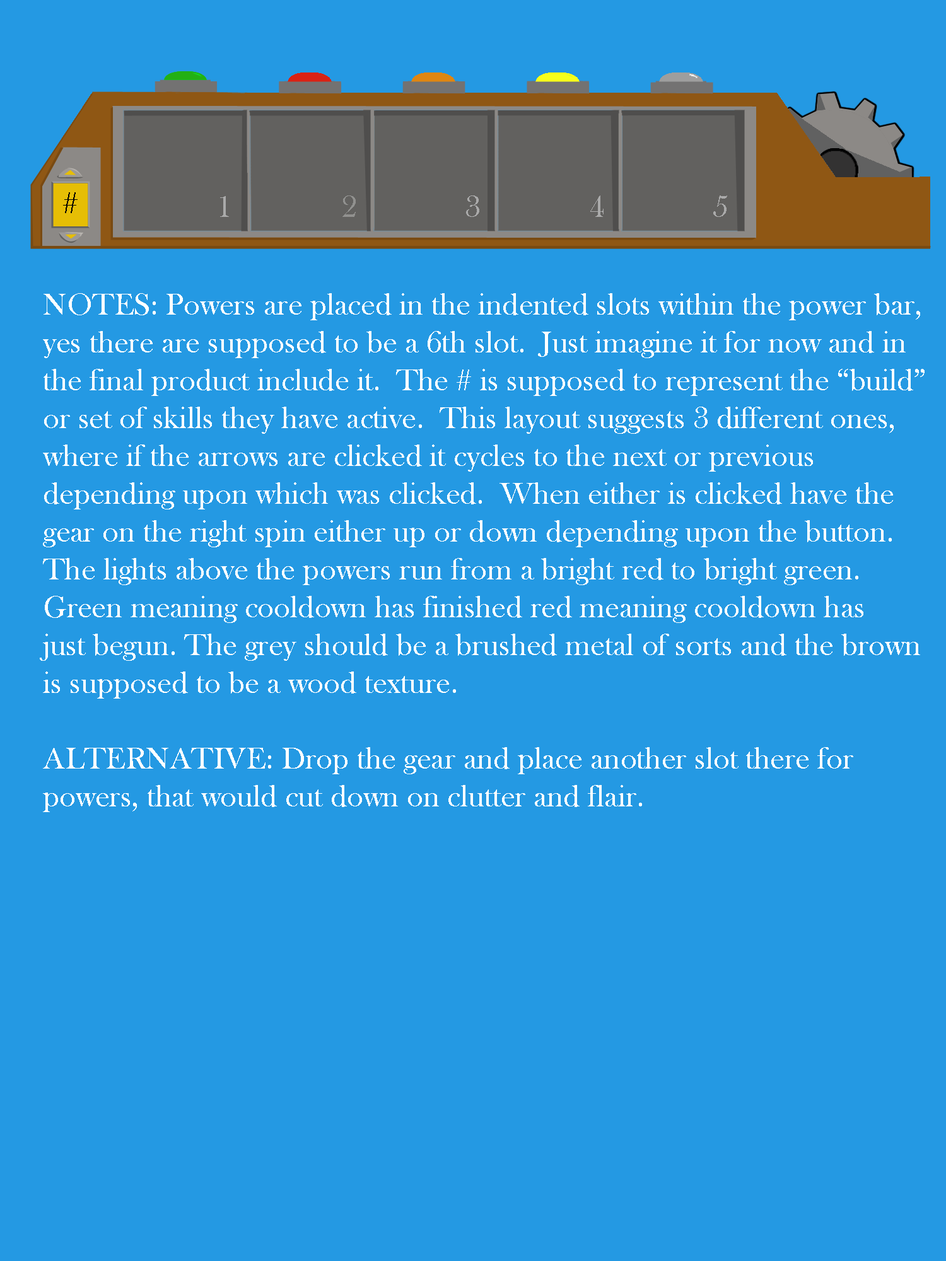
<style>
.page{position:relative;width:946px;height:1261px;background:#2499e3}
.page>*{position:absolute;margin:0}
.t1{font:31.5px "BaskOldFace";color:#000000}
.t2{font:31.5px "BaskOldFace";color:#aaaaaa}
.t3{font:31.5px "BaskOldFace";color:#91918f}
.t4{font:31.5px "BaskOldFace";color:#ffffff}
</style>
<div class="page">
<p class="t1" style="left:63px;top:192px;width:15px;height:21px">#</p>
<p class="t2" style="left:220px;top:196px;width:9px;height:21px">1</p>
<p class="t3" style="left:342px;top:195px;width:14px;height:22px">2</p>
<p class="t2" style="left:466px;top:195px;width:13px;height:22px">3</p>
<p class="t2" style="left:590px;top:195px;width:13px;height:22px">4</p>
<p class="t2" style="left:713px;top:195px;width:14px;height:22px">5</p>
<p class="t4" style="left:40px;top:293px;width:884px;height:519px">NOTES: Powers are placed in the indented slots within the power bar,<br>yes there are supposed to be a 6th slot.  Just imagine it for now and in<br>the final product include it.  The # is supposed to represent the “build”<br>or set of skills they have active.  This layout suggests 3 different ones,<br>where if the arrows are clicked it cycles to the next or previous <br>depending upon which was clicked.  When either is clicked have the<br>gear on the right spin either up or down depending upon the button.<br>The lights above the powers run from a bright red to bright green.  <br>Green meaning cooldown has finished red meaning cooldown has <br>just begun. The grey should be a brushed metal of sorts and the brown<br>is supposed to be a wood texture.<br><br>ALTERNATIVE: Drop the gear and place another slot there for<br>powers, that would cut down on clutter and flair.</p>
</div>
